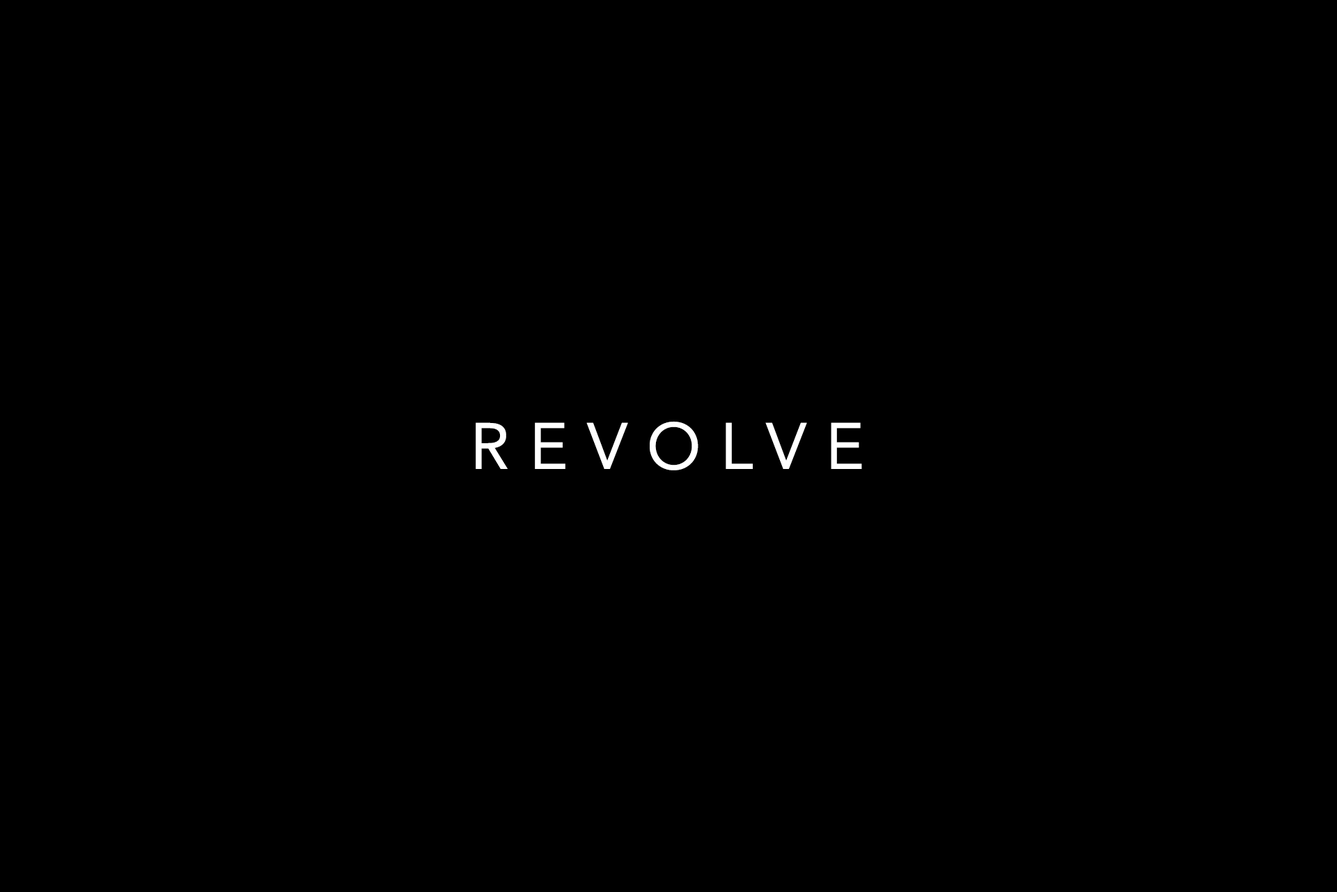
<style>
.page{position:relative;width:1337px;height:892px;background:#000000}
.page>*{position:absolute;margin:0}
.t1{font:65px "Avenir-Roman";letter-spacing:0.3em;color:#ffffff;text-transform:uppercase}
</style>
<div class="page">
<p class="t1" style="left:476px;top:421px;width:386px;height:49px">REVOLVE</p>
</div>
